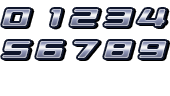
<style>
.page{position:relative;width:170px;height:96px;background:#ffffff}
.page>*{position:absolute;margin:0}
.t1{font:26px "2051PLASTIC-ALP53"}
</style>
<div class="page">
<p class="t1" style="left:2px;top:9px;width:29px;height:17px">0</p>
<p class="t1" style="left:51px;top:9px;width:10px;height:18px">1</p>
<p class="t1" style="left:70px;top:9px;width:29px;height:17px">2</p>
<p class="t1" style="left:104px;top:9px;width:29px;height:17px">3</p>
<p class="t1" style="left:137px;top:9px;width:29px;height:17px">4</p>
<p class="t1" style="left:2px;top:41px;width:29px;height:17px">5</p>
<p class="t1" style="left:36px;top:41px;width:27px;height:17px">6</p>
<p class="t1" style="left:74px;top:41px;width:24px;height:17px">7</p>
<p class="t1" style="left:104px;top:41px;width:29px;height:17px">8</p>
<p class="t1" style="left:139px;top:41px;width:28px;height:17px">9</p>
</div>
